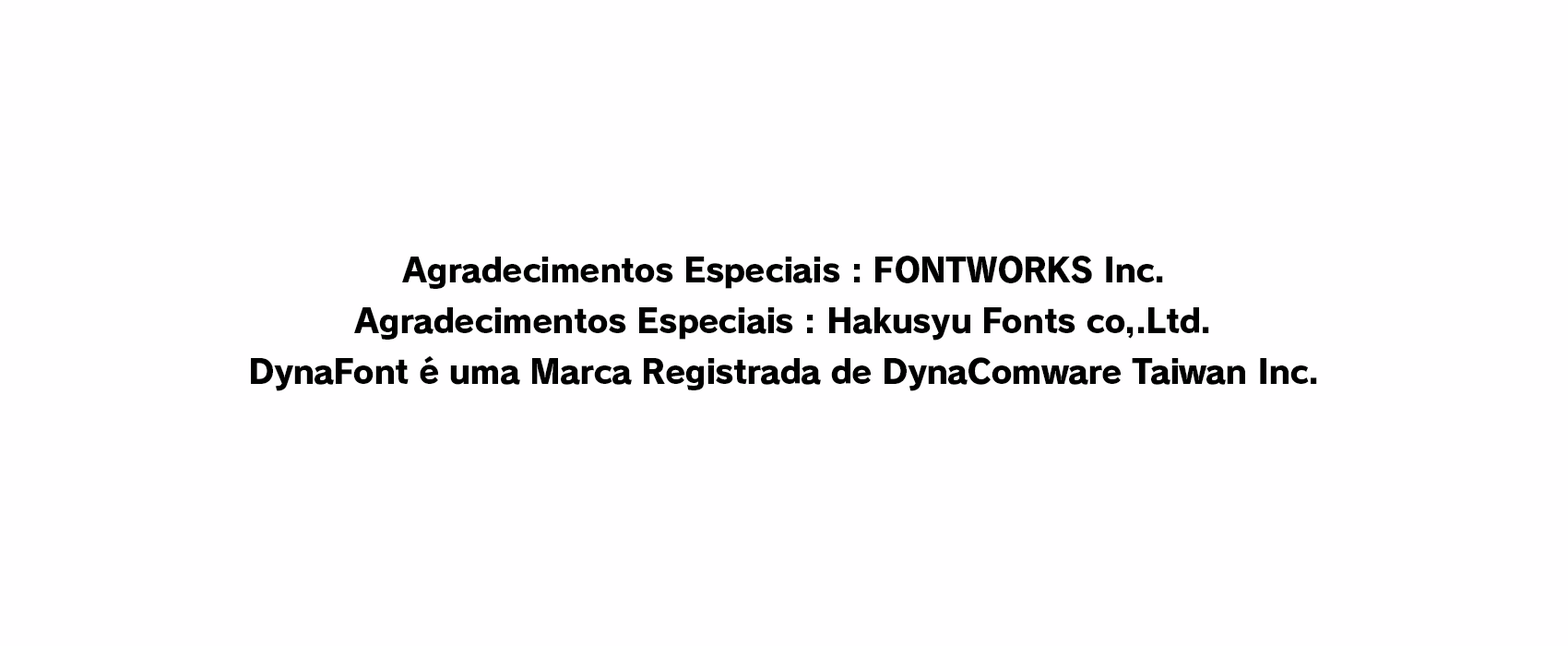
<style>
.page{position:relative;width:1568px;height:646px;background:#fffeff}
.page>*{position:absolute;margin:0}
.t1{font:33.2px "RodinPro-EB";letter-spacing:-0.029em;color:#000000}
.t2{font:33.2px "RodinPro-EB";letter-spacing:-0.027em;color:#000000}
.t3{font:33.2px "RodinPro-EB";letter-spacing:-0.031em;color:#000000}
</style>
<div class="page">
<p class="t1" style="left:402px;top:255px;width:761px;height:34px">Agradecimentos Especiais : FONTWORKS Inc.</p>
<p class="t2" style="left:354px;top:307px;width:855px;height:33px">Agradecimentos Especiais : Hakusyu Fonts co,.Ltd.</p>
<p class="t3" style="left:251px;top:355px;width:1066px;height:36px">DynaFont é uma Marca Registrada de DynaComware Taiwan Inc.</p>
</div>
